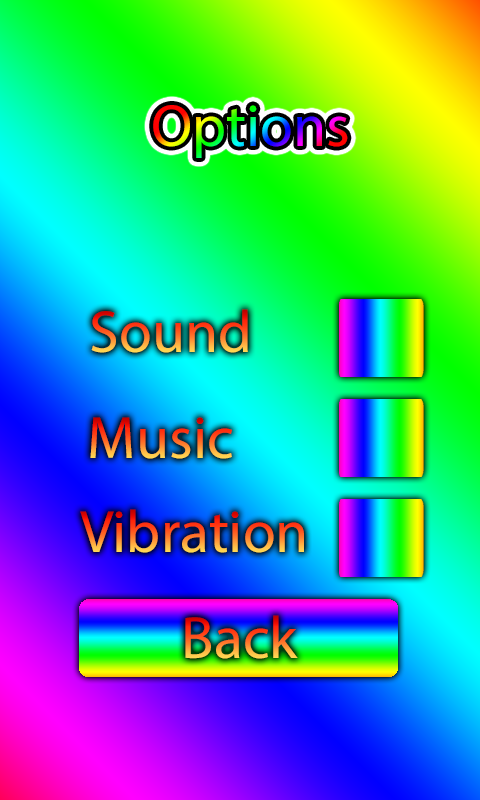
<style>
.page{position:relative;width:480px;height:800px}
.page>*{position:absolute;margin:0}
.t1{font:60px "MyriadPro-Regular"}
</style>
<div class="page">
<p class="t1" style="left:91px;top:309px;width:157px;height:44px">Sound</p>
<p class="t1" style="left:90px;top:417px;width:142px;height:42px">Music</p>
<p class="t1" style="left:80px;top:509px;width:224px;height:44px">Vibration</p>
<p class="t1" style="left:185px;top:615px;width:113px;height:44px">Back</p>
</div>
